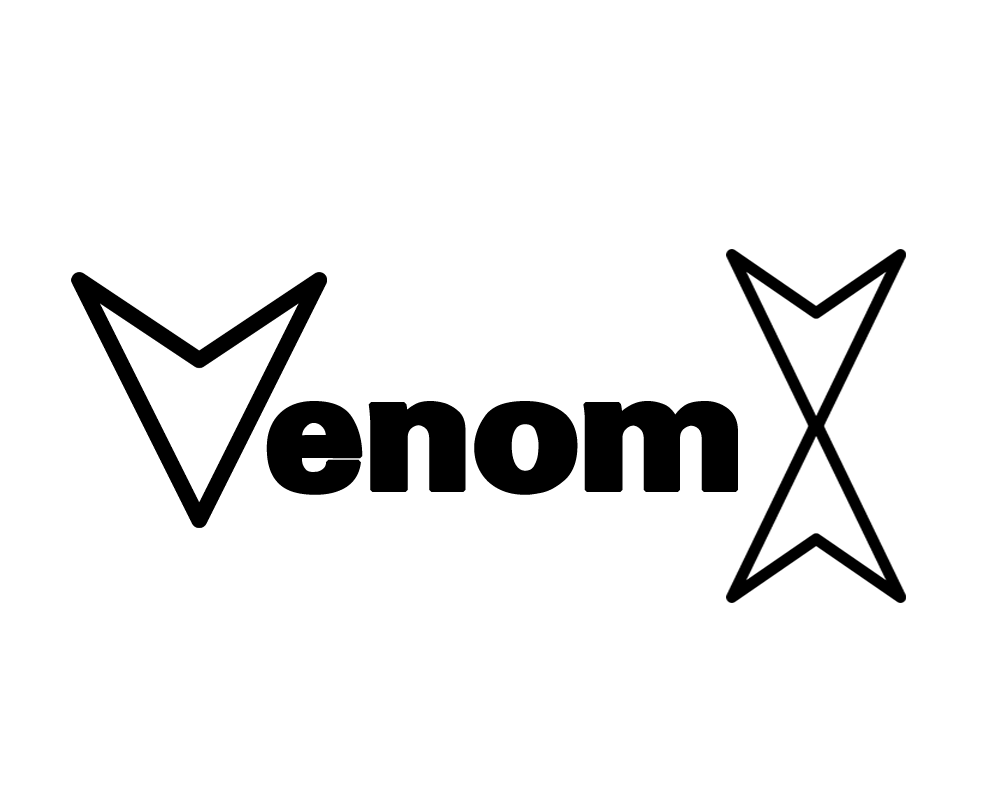
<style>
.page{position:relative;width:1000px;height:800px;background:#ffffff}
.page>*{position:absolute;margin:0}
.t1{font:166.7px "Univers-Black";letter-spacing:-0.05em;color:#000000;font-weight:bold}
</style>
<div class="page">
<p class="t1" style="left:266px;top:401px;width:472px;height:94px">enom</p>
</div>
